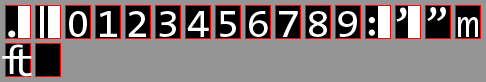
<style>
.page{position:relative;width:486px;height:82px;background:#959595}
.page>*{position:absolute;margin:0}
.t1{font:40px "TheSansMonoLF-M5Regular";letter-spacing:0.15em;color:#ffffff}
.t2{font:40px/39px "TheSansMonoLF-M5Regular";letter-spacing:-0.33em;color:#ffffff}
.t3{font:40px/39px "TheSansMonoLF-M5Regular";letter-spacing:0.158em;color:#ffffff}
</style>
<div class="page">
<p class="t1" style="left:69px;top:7px;width:409px;height:30px">0123456789  ”m</p>
<p class="t2" style="left:2px;top:30px;width:30px;height:47px"><span class="t3">.<br></span>ft</p>
</div>
